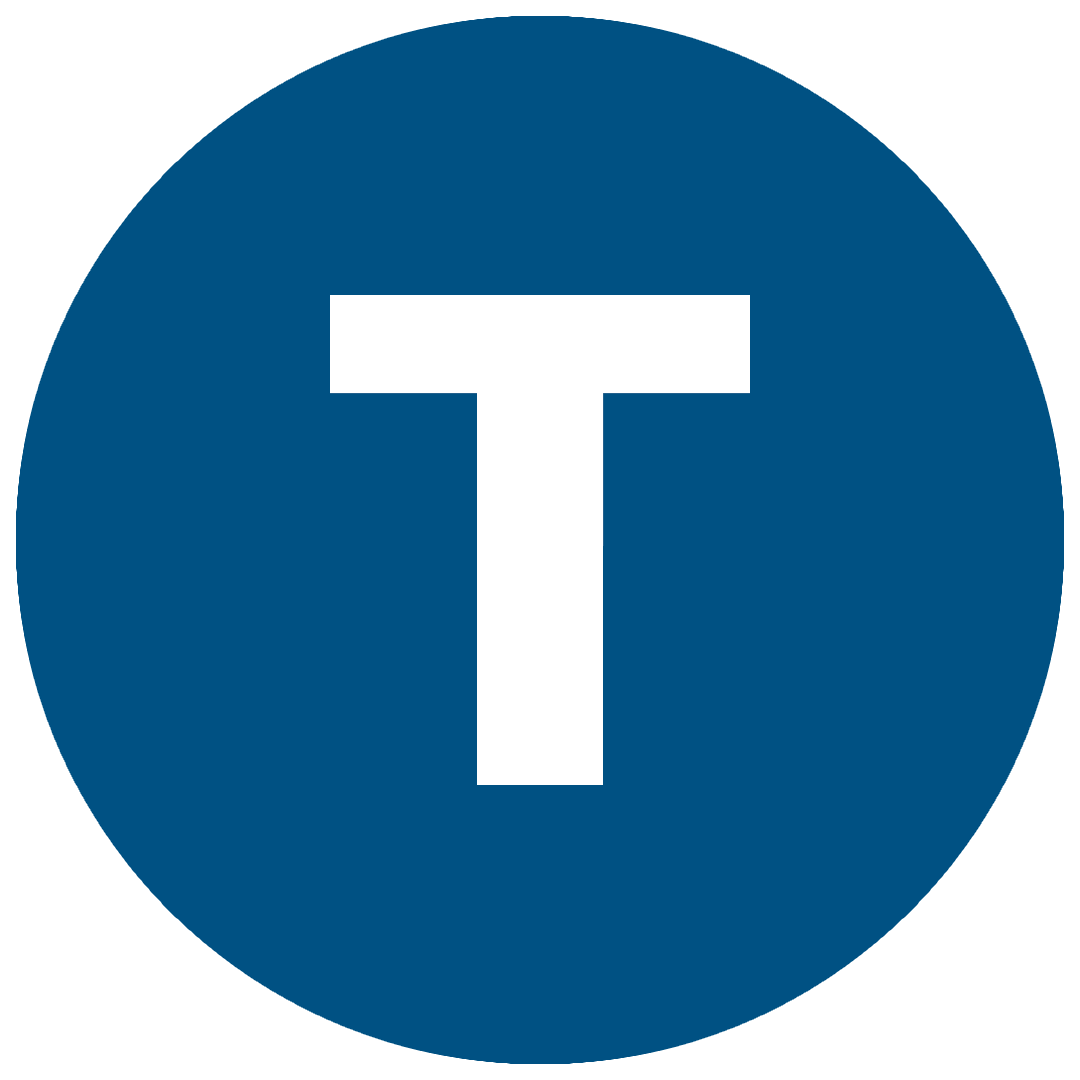
<style>
.page{position:relative;width:1080px;height:1080px;background:#005183}
.page>*{position:absolute;margin:0}
.t1{font:700px "RussoOne-Regular";color:#ffffff}
</style>
<div class="page">
<p class="t1" style="left:330px;top:295px;width:420px;height:490px">T</p>
</div>
